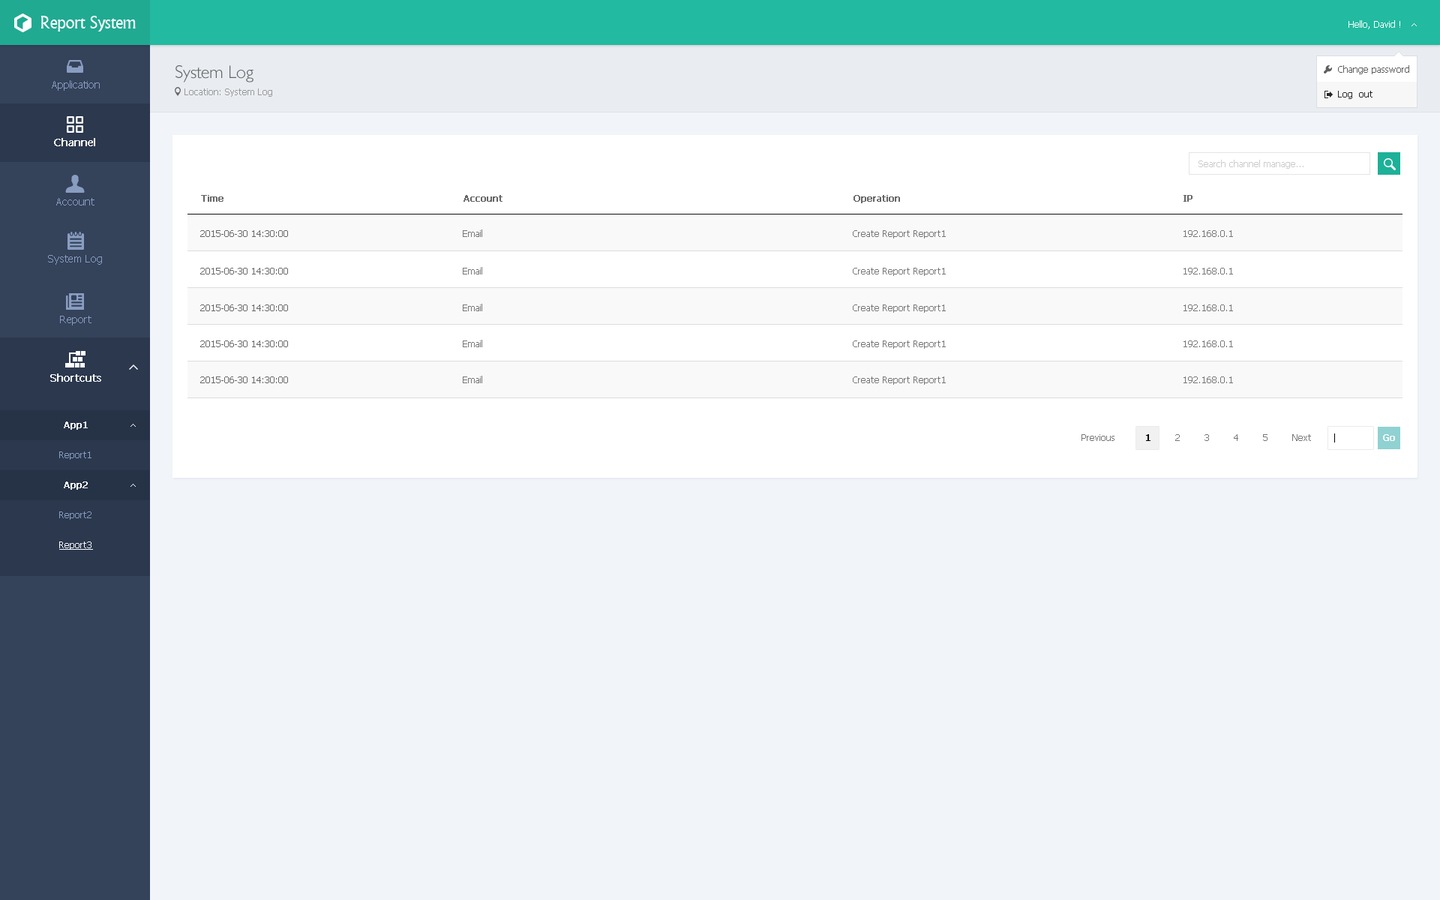
<style>
.page{position:relative;width:1440px;height:900px;background:#f1f4f9}
.page>*{position:absolute;margin:0}
.t1{font:18px "Narkisim";letter-spacing:-0.022em;color:#ffffff}
.t2{font:9px "Tahoma";color:#ffffff}
.t3{font:18px "084-CAI978";color:#666666}
.t4{font:9px "Tahoma";color:#5f5f5f}
.t5{font:10.5px "Tahoma";color:#899dc1}
.t6{font:9px "Tahoma";color:#999999}
.t7{font:9px "Tahoma";color:#262626}
.t8{font:10.5px "Tahoma";color:#ffffff;font-weight:bold}
.t9{font:9px "Tahoma";color:#cccccc}
.t10{font:9px "Tahoma";color:#666666;font-weight:bold}
.t11{font:9px "Tahoma";color:#666666}
.t12{font:9px "Tahoma";color:#777777}
.t13{font:9px "Tahoma";color:#ffffff;font-weight:bold}
.t14{font:9px "Tahoma";color:#000000;font-weight:bold}
.t15{font:9px "Tahoma";color:#899dc1}
.t16{font:9px "Tahoma";color:#ffffff;text-decoration:underline}
</style>
<div class="page">
<p class="t1" style="left:40px;top:16px;width:96px;height:16px">Report System</p>
<p class="t2" style="left:1348px;top:20px;width:52px;height:9px">Hello, David !</p>
<p class="t3" style="left:176px;top:65px;width:78px;height:17px">System Log</p>
<p class="t4" style="left:1338px;top:65px;width:71px;height:9px">Change password</p>
<p class="t5" style="left:52px;top:80px;width:48px;height:11px">Application</p>
<p class="t6" style="left:184px;top:88px;width:88px;height:9px">Location: System Log</p>
<p class="t7" style="left:1338px;top:91px;width:34px;height:8px">Log  out</p>
<p class="t8" style="left:54px;top:138px;width:41px;height:8px">Channel</p>
<p class="t9" style="left:1198px;top:160px;width:106px;height:9px">Search channel manage...</p>
<p class="t5" style="left:56px;top:198px;width:38px;height:8px">Account</p>
<p class="t10" style="left:201px;top:195px;width:23px;height:7px">Time</p>
<p class="t10" style="left:464px;top:195px;width:38px;height:7px">Account</p>
<p class="t10" style="left:854px;top:195px;width:46px;height:8px">Operation</p>
<p class="t10" style="left:1184px;top:195px;width:8px;height:7px">IP</p>
<p class="t11" style="left:200px;top:230px;width:88px;height:7px">2015-06-30 14:30:00</p>
<p class="t12" style="left:463px;top:230px;width:19px;height:7px">Email</p>
<p class="t12" style="left:853px;top:230px;width:93px;height:8px">Create Report Report1</p>
<p class="t12" style="left:1184px;top:230px;width:49px;height:7px">192.168.0.1</p>
<p class="t5" style="left:48px;top:255px;width:54px;height:10px">System Log</p>
<p class="t11" style="left:200px;top:268px;width:88px;height:6px">2015-06-30 14:30:00</p>
<p class="t12" style="left:463px;top:267px;width:19px;height:7px">Email</p>
<p class="t12" style="left:853px;top:268px;width:93px;height:8px">Create Report Report1</p>
<p class="t12" style="left:1184px;top:268px;width:49px;height:6px">192.168.0.1</p>
<p class="t11" style="left:200px;top:304px;width:88px;height:7px">2015-06-30 14:30:00</p>
<p class="t12" style="left:463px;top:304px;width:19px;height:7px">Email</p>
<p class="t12" style="left:853px;top:304px;width:93px;height:9px">Create Report Report1</p>
<p class="t12" style="left:1184px;top:304px;width:49px;height:7px">192.168.0.1</p>
<p class="t5" style="left:60px;top:316px;width:32px;height:10px">Report</p>
<p class="t11" style="left:200px;top:340px;width:88px;height:7px">2015-06-30 14:30:00</p>
<p class="t12" style="left:463px;top:340px;width:19px;height:7px">Email</p>
<p class="t12" style="left:853px;top:340px;width:93px;height:9px">Create Report Report1</p>
<p class="t12" style="left:1184px;top:340px;width:49px;height:7px">192.168.0.1</p>
<p class="t8" style="left:50px;top:374px;width:51px;height:8px">Shortcuts</p>
<p class="t11" style="left:200px;top:376px;width:88px;height:7px">2015-06-30 14:30:00</p>
<p class="t12" style="left:463px;top:376px;width:19px;height:7px">Email</p>
<p class="t12" style="left:853px;top:376px;width:93px;height:9px">Create Report Report1</p>
<p class="t12" style="left:1184px;top:376px;width:49px;height:7px">192.168.0.1</p>
<p class="t13" style="left:64px;top:422px;width:24px;height:8px">App1</p>
<p class="t12" style="left:1082px;top:434px;width:229px;height:7px">Previous          <span class="t14">1</span>        2        3        4        5        Next</p>
<p class="t13" style="left:1383px;top:434px;width:12px;height:7px">Go</p>
<p class="t15" style="left:59px;top:452px;width:33px;height:8px">Report1</p>
<p class="t13" style="left:64px;top:482px;width:24px;height:8px">App2</p>
<p class="t15" style="left:59px;top:512px;width:33px;height:8px">Report2</p>
<p class="t16" style="left:59px;top:542px;width:34px;height:8px">Report3</p>
</div>
